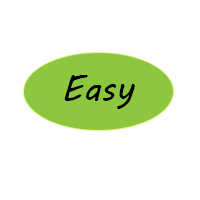
<style>
.page{position:relative;width:200px;height:200px;background:#ffffff}
.page>*{position:absolute;margin:0}
.t1{font:36px "MVBoli";color:#000000}
</style>
<div class="page">
<p class="t1" style="left:64px;top:75px;width:71px;height:34px">Easy</p>
</div>
